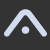
<style>
.page{position:relative;width:50px;height:50px;background:#333333}
.page>*{position:absolute;margin:0}
.t1{font:60px "SpaceAge";color:#d1dbef}
</style>
<div class="page">
<p class="t1" style="left:4px;top:9px;width:43px;height:28px">A</p>
</div>
